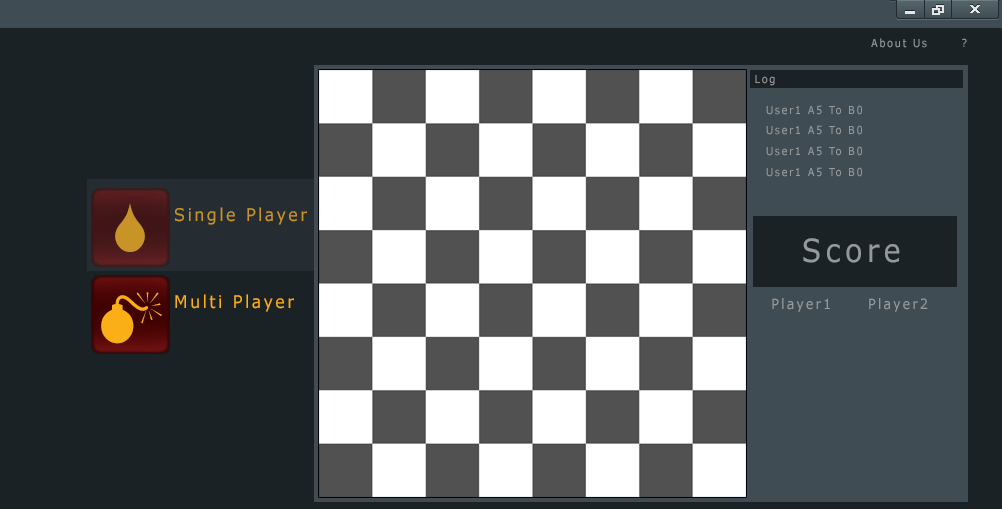
<style>
.page{position:relative;width:1002px;height:509px;background:#1b2226}
.page>*{position:absolute;margin:0}
.t1{font:11px "Verdana";letter-spacing:0.15em;color:#96999b;scale:0.91 1}
.t2{font:17.6px "Verdana";letter-spacing:0.15em;color:#c89427;scale:0.91 1}
.t3{font:31.9px "Verdana";letter-spacing:0.15em;color:#96999b;scale:0.91 1}
.t4{font:17.6px "Verdana";letter-spacing:0.15em;color:#fbaf17;scale:0.91 1}
.t5{font:14.3px "Verdana";letter-spacing:0.15em;color:#96999b;scale:0.91 1}
</style>
<div class="page">
<p class="t1" style="left:871px;top:38px;width:56px;height:10px">About Us</p>
<p class="t1" style="left:962px;top:38px;width:5px;height:9px">?</p>
<p class="t1" style="left:755px;top:75px;width:20px;height:11px">Log</p>
<p class="t1" style="left:766px;top:105px;width:96px;height:10px">User1 A5 To B0</p>
<p class="t1" style="left:766px;top:125px;width:96px;height:10px">User1 A5 To B0</p>
<p class="t1" style="left:766px;top:146px;width:96px;height:10px">User1 A5 To B0</p>
<p class="t1" style="left:766px;top:167px;width:96px;height:10px">User1 A5 To B0</p>
<p class="t2" style="left:175px;top:207px;width:132px;height:18px">Single Player</p>
<p class="t3" style="left:803px;top:238px;width:97px;height:25px">Score</p>
<p class="t4" style="left:175px;top:294px;width:119px;height:18px">Multi Player</p>
<p class="t5" style="left:772px;top:298px;width:58px;height:14px">Player1</p>
<p class="t5" style="left:869px;top:298px;width:59px;height:14px">Player2</p>
</div>
